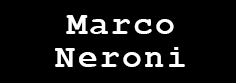
<style>
.page{position:relative;width:236px;height:83px;background:#000000}
.page>*{position:absolute;margin:0}
.t1{font:33.3px/33.3px "CourierNewPS-BoldMT";letter-spacing:0.067em;color:#ffffff}
</style>
<div class="page">
<p class="t1" style="left:55px;top:15px;width:130px;height:52px;text-align:center">Marco<br>Neroni</p>
</div>
